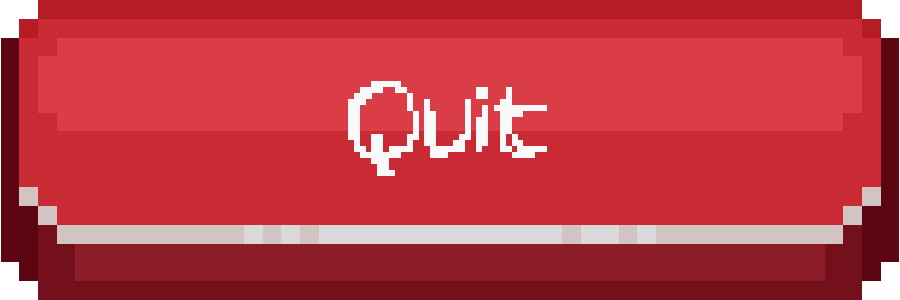
<style>
.page{position:relative;width:900px;height:300px;background:#ca2a33}
.page>*{position:absolute;margin:0}
.t1{font:93.5px "ScareEmAway";color:#f9f9f9}
</style>
<div class="page">
<p class="t1" style="left:348px;top:81px;width:199px;height:95px">Quit</p>
</div>
